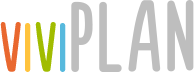
<style>
.page{position:relative;width:194px;height:72px;background:#ffffff}
.page>*{position:absolute;margin:0}
.t1{font:111.8px "NovitoNova-Regular";color:#bebebe;text-transform:uppercase}
.t2{font:111.8px "NovitoNova-Regular";color:#e9682f;font-variant:small-caps}
.t3{font:111.8px "NovitoNova-Regular";color:#ffc33d;font-variant:small-caps}
.t4{font:111.8px "NovitoNova-Regular";color:#a1bc00;font-variant:small-caps}
.t5{font:111.8px "NovitoNova-Regular";color:#57b9dd;font-variant:small-caps}
</style>
<div class="page">
<p class="t1" style="left:0px;top:0px;width:194px;height:72px"><span class="t2">v</span><span class="t3">i</span><span class="t4">v</span><span class="t5">i</span>Plan</p>
</div>
